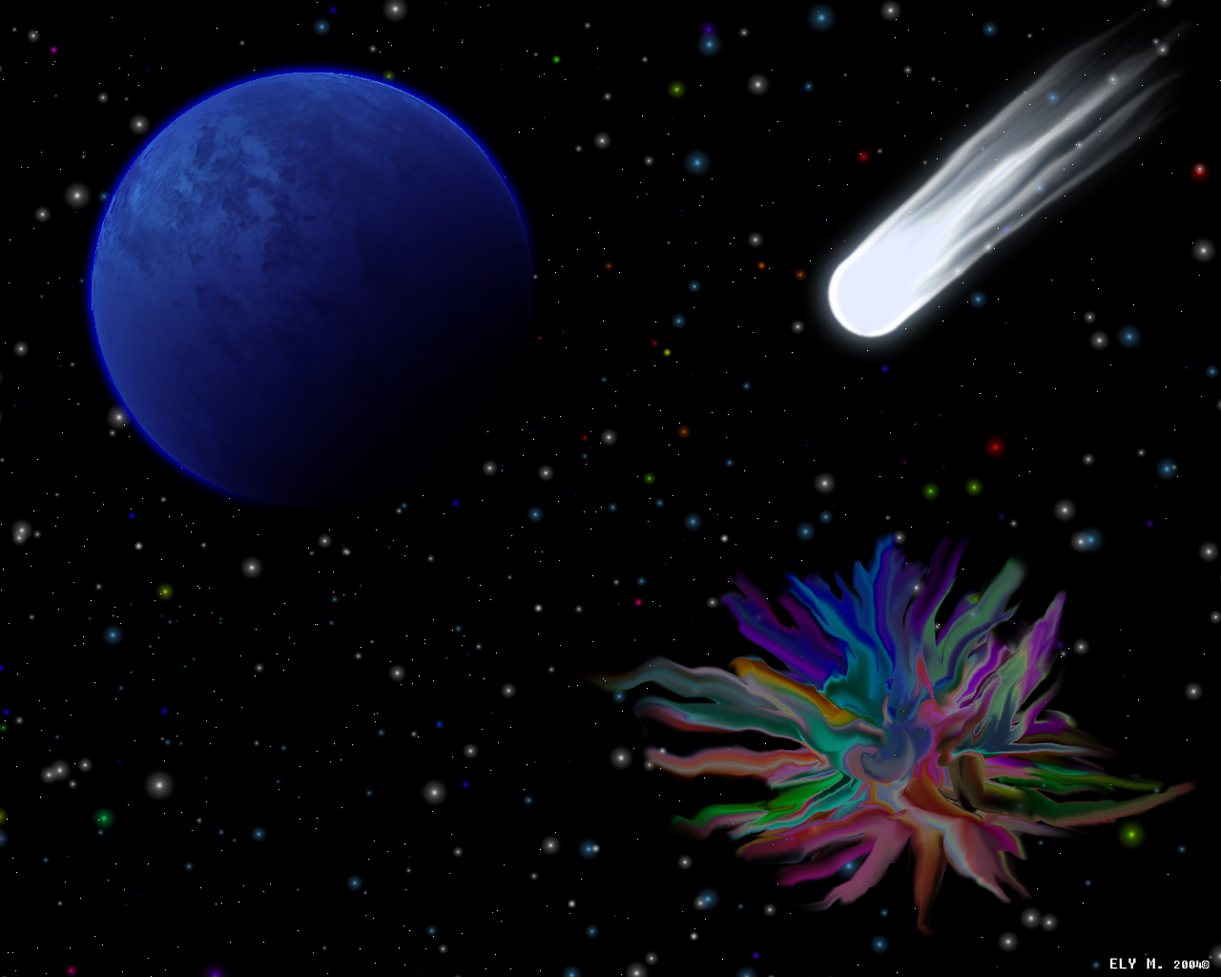
<style>
.page{position:relative;width:1221px;height:977px;background:#000000}
.page>*{position:absolute;margin:0}
.t1{font:17.2px "FixedsysExcelsior2.00";color:#ffffff}
.t2{font:13.4px "FixedsysExcelsior2.00";color:#ffffff}
</style>
<div class="page">
<p class="t1" style="left:1110px;top:958px;width:99px;height:11px">ELY M. <span class="t2">2004®</span></p>
</div>
